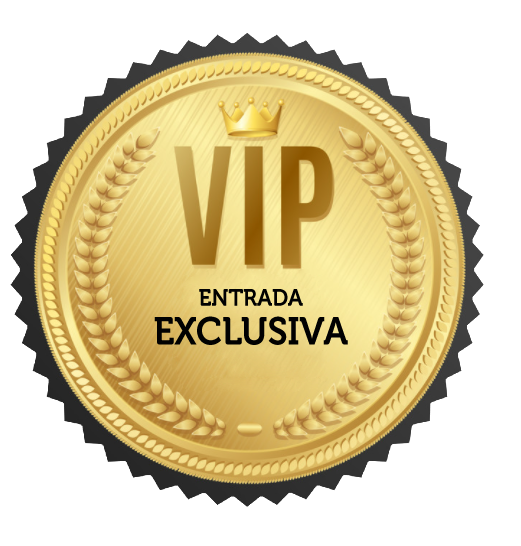
<style>
.page{position:relative;width:521px;height:546px;background:#ffffff}
.page>*{position:absolute;margin:0}
.t1{font:38.8px/38.8px "Museo-700";letter-spacing:-0.01em;color:#010101;scale:0.95 1}
.t2{font:23.7px/38.8px "Museo-700";letter-spacing:-0.01em;color:#010101;scale:0.95 1}
</style>
<div class="page">
<p class="t1" style="left:154px;top:289px;width:194px;height:56px;text-align:center"><span class="t2">ENTRADA<br></span>EXCLUSIVA</p>
</div>
